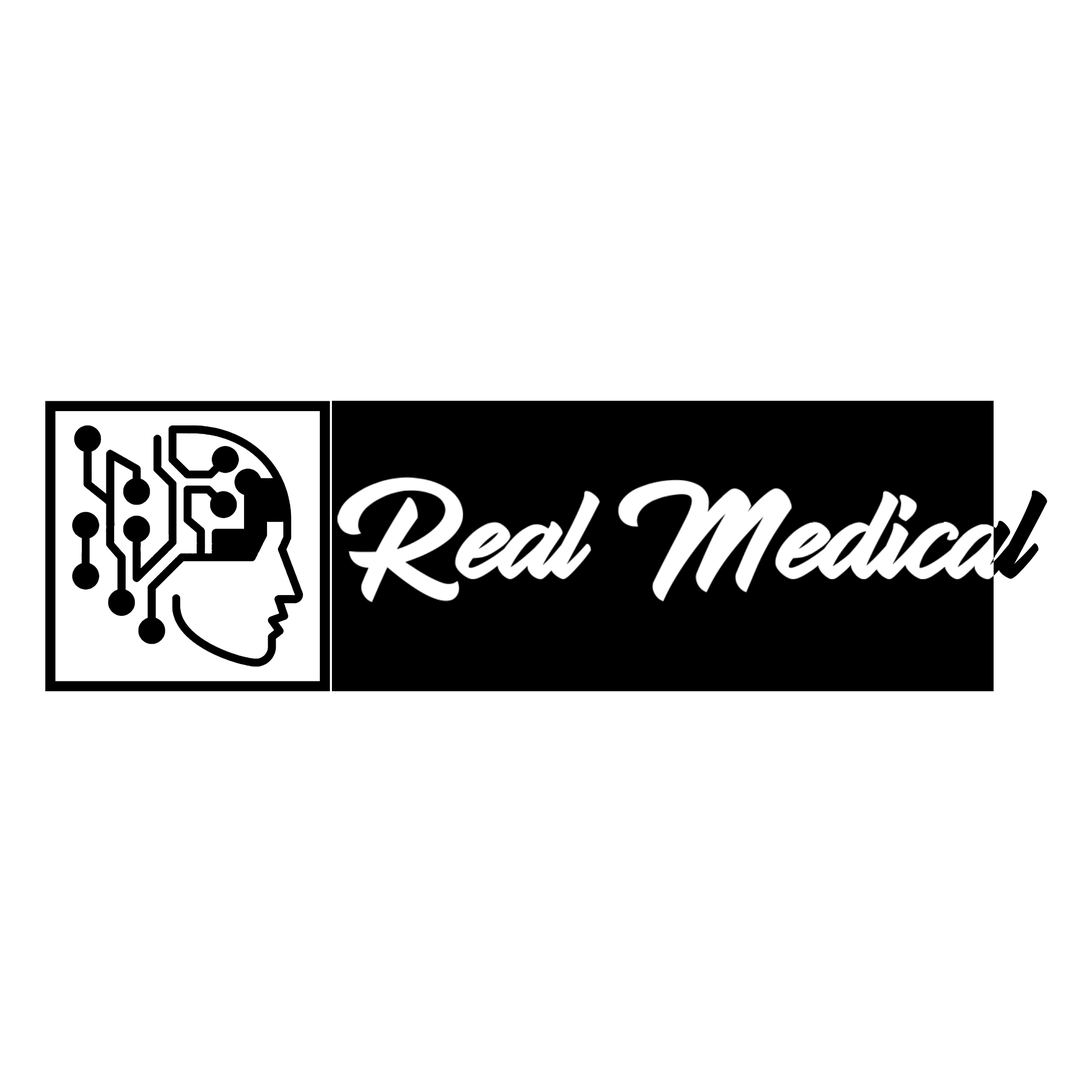
<style>
.page{position:relative;width:1092px;height:1092px;background:#ffffff}
.page>*{position:absolute;margin:0}
.t1{font:166.5px "HadsutScript-Regular";color:#ffffff}
</style>
<div class="page">
<p class="t1" style="left:337px;top:477px;width:710px;height:125px">Real Medical</p>
</div>
